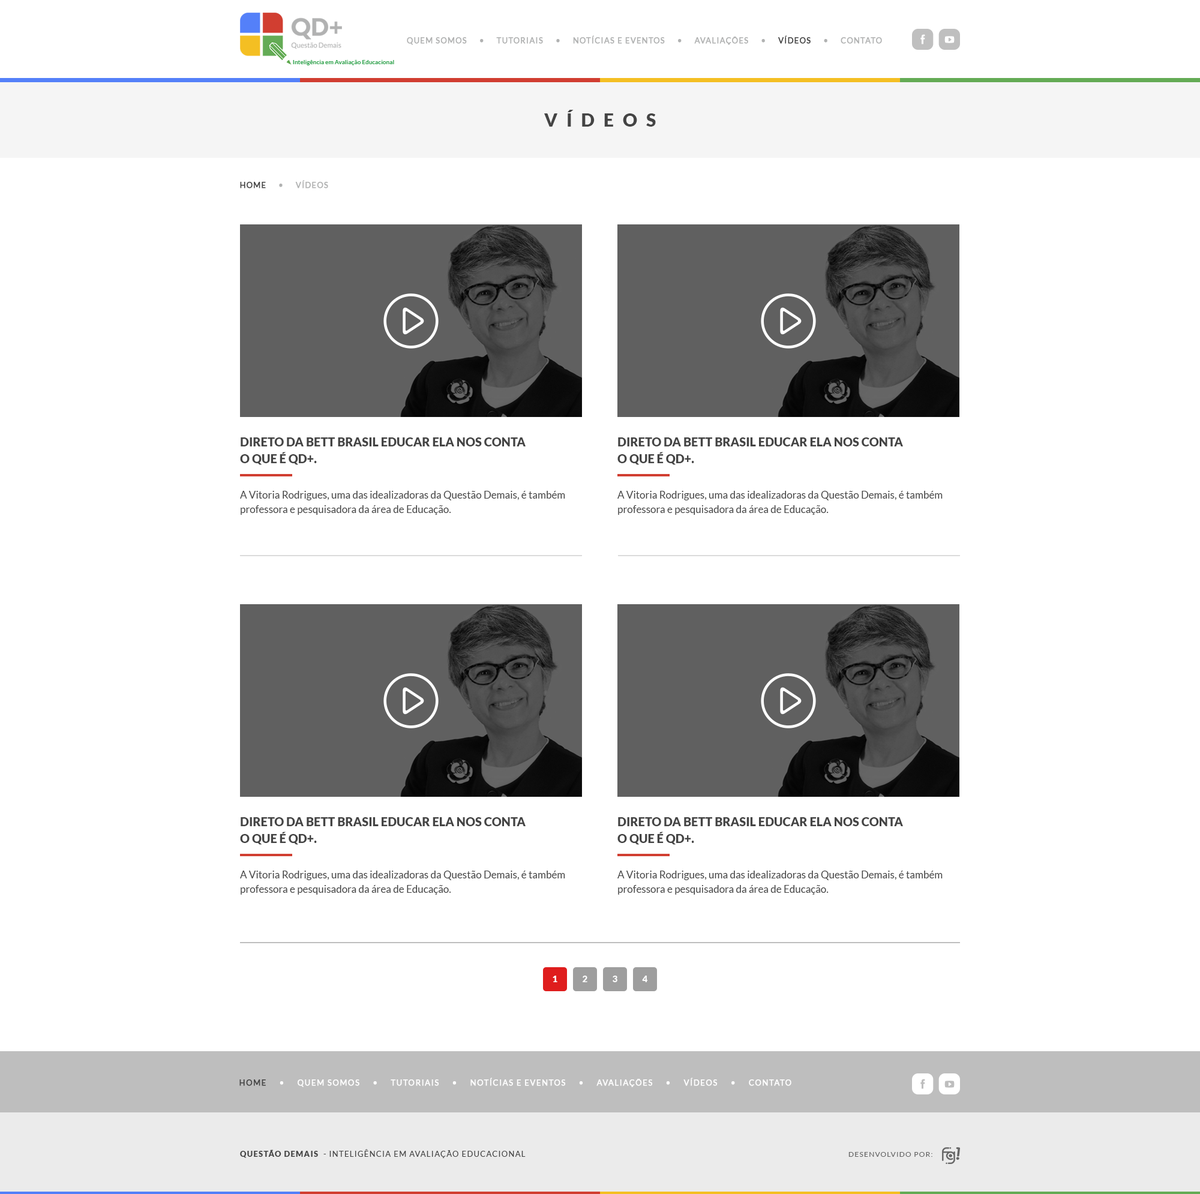
<style>
.page{position:relative;width:1200px;height:1194px;background:#ffffff}
.page>*{position:absolute;margin:0}
.t1{font:7.5px "Lato-Regular";letter-spacing:0.1em;color:#b1b2b2;text-transform:uppercase;font-weight:bold}
.t2{font:7.5px "Lato-Regular";letter-spacing:0.1em;color:#444444;text-transform:uppercase;font-weight:bold}
.t3{font:6px "Lato-Bold";color:#34a853}
.t4{font:18px "Lato-Black";letter-spacing:0.5em;color:#444444;text-transform:uppercase}
.t5{font:12px/16.8px "Lato-Black";color:#444444;text-transform:uppercase}
.t6{font:10.2px/14.4px "Lato-Regular";color:#444444}
.t7{font:9px "Lato-Black";color:#ffffff;text-transform:uppercase}
.t8{font:7.8px "Lato-Regular";letter-spacing:0.1em;color:#ffffff;text-transform:uppercase;font-weight:bold}
.t9{font:7.8px "Lato-Regular";letter-spacing:0.1em;color:#444444;text-transform:uppercase;font-weight:bold}
.t10{font:7.8px "Lato-Regular";letter-spacing:0.1em;color:#444444;text-transform:uppercase}
.t11{font:7.8px "Lato-Black";letter-spacing:0.1em;color:#444444;text-transform:uppercase}
.t12{font:7.2px "Lato-Regular";letter-spacing:0.1em;color:#666666;text-transform:uppercase}
</style>
<div class="page">
<p class="t1" style="left:407px;top:35px;width:475px;height:10px">Quem somos     •     tutoriais     •     Notícias e eventos     •     Avaliações     •     <span class="t2">Vídeos</span>     •     Contato</p>
<p class="t3" style="left:293px;top:60px;width:101px;height:5px">Inteligência em Avaliação Educacional</p>
<p class="t4" style="left:544px;top:110px;width:112px;height:17px">Vídeos</p>
<p class="t1" style="left:240px;top:180px;width:88px;height:8px"><span class="t2">Home</span>     •     Vídeos</p>
<p class="t5" style="left:240px;top:437px;width:286px;height:28px">Direto da Bett Brasil Educar ela nos conta<br>o que é QD+.</p>
<p class="t5" style="left:617px;top:437px;width:286px;height:28px">Direto da Bett Brasil Educar ela nos conta<br>o que é QD+.</p>
<p class="t6" style="left:240px;top:491px;width:325px;height:24px">A Vitoria Rodrigues, uma das idealizadoras da Questão Demais, é também<br>professora e pesquisadora da área de Educação.</p>
<p class="t6" style="left:617px;top:491px;width:326px;height:24px">A Vitoria Rodrigues, uma das idealizadoras da Questão Demais, é também<br>professora e pesquisadora da área de Educação.</p>
<p class="t5" style="left:240px;top:817px;width:286px;height:28px">Direto da Bett Brasil Educar ela nos conta<br>o que é QD+.</p>
<p class="t5" style="left:617px;top:817px;width:286px;height:28px">Direto da Bett Brasil Educar ela nos conta<br>o que é QD+.</p>
<p class="t6" style="left:240px;top:871px;width:325px;height:24px">A Vitoria Rodrigues, uma das idealizadoras da Questão Demais, é também<br>professora e pesquisadora da área de Educação.</p>
<p class="t6" style="left:617px;top:871px;width:326px;height:24px">A Vitoria Rodrigues, uma das idealizadoras da Questão Demais, é também<br>professora e pesquisadora da área de Educação.</p>
<p class="t7" style="left:553px;top:976px;width:4px;height:6px">1</p>
<p class="t7" style="left:583px;top:976px;width:4px;height:6px">2</p>
<p class="t7" style="left:613px;top:976px;width:4px;height:6px">3</p>
<p class="t7" style="left:642px;top:976px;width:5px;height:6px">4</p>
<p class="t8" style="left:239px;top:1078px;width:552px;height:9px"><span class="t9">Home</span>     •     Quem somos     •     tutoriais     •     Notícias e eventos     •     Avaliações     •     Vídeos     •     Contato</p>
<p class="t10" style="left:240px;top:1149px;width:286px;height:9px"><span class="t11">Questão Demais</span>  - Inteligência em Avaliação Educacional</p>
<p class="t12" style="left:848px;top:1152px;width:84px;height:5px">Desenvolvido por:</p>
</div>
